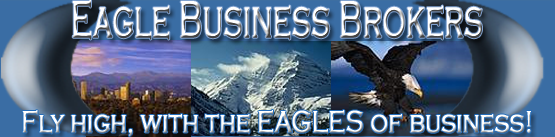
<style>
.page{position:relative;width:555px;height:137px}
.page>*{position:absolute;margin:0}
.t1{font:52.9px "CopperplateGothic-Light";font-weight:bold;scale:0.57 1}
.t2{font:31.4px "CopperplateGothic-Light";color:#ffffff;font-weight:bold;scale:0.74 1}
</style>
<div class="page">
<p class="t1" style="left:72px;top:0px;width:410px;height:40px">Eagle Business Brokers</p>
<p class="t2" style="left:22px;top:110px;width:509px;height:26px">Fly high, with the EAGLES of business!</p>
</div>
